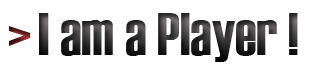
<style>
.page{position:relative;width:327px;height:72px;background:#ffffff}
.page>*{position:absolute;margin:0}
.t1{font:60px "Haettenschweiler"}
</style>
<div class="page">
<p class="t1" style="left:39px;top:13px;width:259px;height:49px">I am a Player !</p>
<p class="t1" style="left:9px;top:26px;width:22px;height:20px">&gt;</p>
</div>
